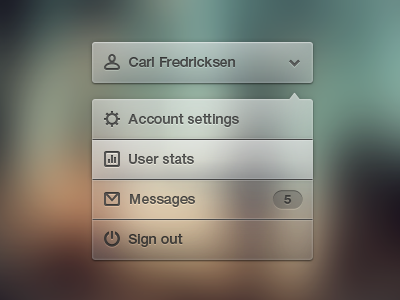
<style>
.page{position:relative;width:400px;height:300px}
.page>*{position:absolute;margin:0}
.t1{font:14px "HelveticaNeueCyr-Medium";letter-spacing:0.005em;color:#424242}
.t2{font:13px "HelveticaNeueCyr-Bold";letter-spacing:0.005em;color:#393939}
.t3{font:14px "HelveticaNeueCyr-Medium";letter-spacing:0.005em;color:#303030}
</style>
<div class="page">
<p class="t1" style="left:129px;top:57px;width:106px;height:10px">Carl Fredricksen</p>
<p class="t1" style="left:128px;top:113px;width:111px;height:14px">Account settings</p>
<p class="t1" style="left:129px;top:153px;width:65px;height:11px">User stats</p>
<p class="t1" style="left:130px;top:194px;width:65px;height:13px">Messages</p>
<p class="t2" style="left:284px;top:195px;width:8px;height:9px">5</p>
<p class="t3" style="left:128px;top:233px;width:55px;height:14px">Sign out</p>
</div>
